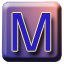
<style>
.page{position:relative;width:64px;height:64px}
.page>*{position:absolute;margin:0}
.t1{font:52.8px "SpaceGrotesk-Light";color:#2a1fc3;font-weight:bold}
</style>
<div class="page">
<p class="t1" style="left:12px;top:13px;width:39px;height:38px">M</p>
</div>
